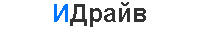
<style>
.page{position:relative;width:200px;height:30px;background:#ffffff}
.page>*{position:absolute;margin:0}
.t1{font:25px "Arial-BoldMT";color:#333333}
.t2{font:25px "Arial-BoldMT";color:#0075ff}
</style>
<div class="page">
<p class="t1" style="left:54px;top:2px;width:92px;height:25px"><span class="t2">И</span>Драйв</p>
</div>
